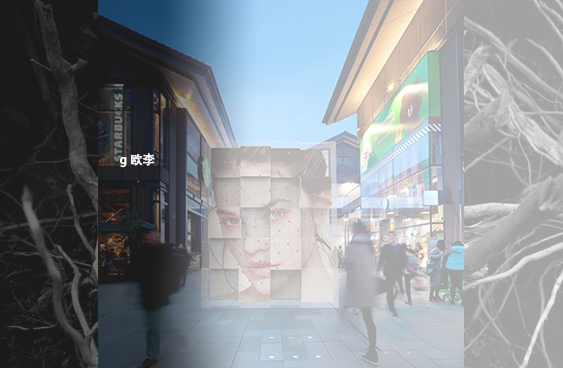
<style>
.page{position:relative;width:563px;height:368px}
.page>*{position:absolute;margin:0}
.t1{font:12px "AdobeHeitiStd-Regular";color:#f5f3f3;font-weight:bold}
</style>
<div class="page">
<p class="t1" style="left:120px;top:153px;width:35px;height:15px">g欧李</p>
</div>
